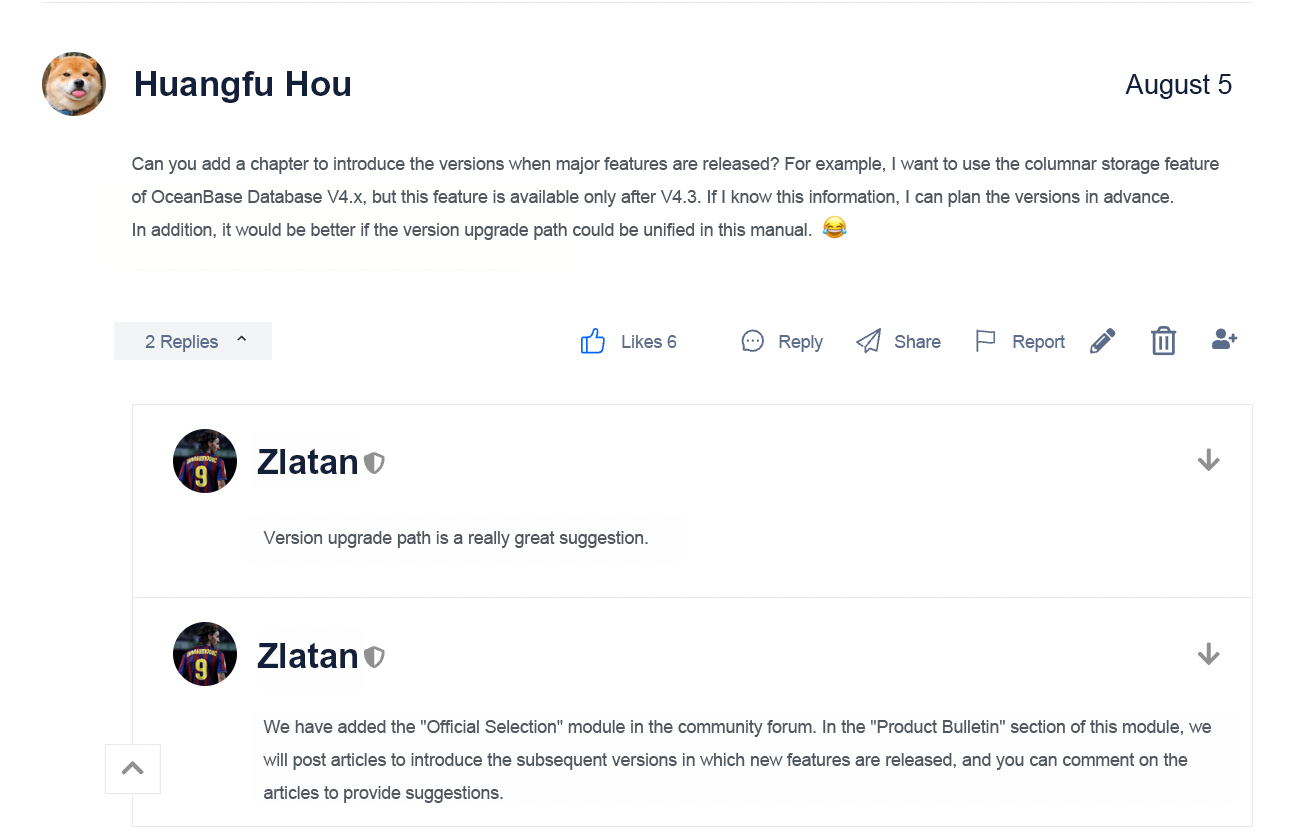
<style>
.page{position:relative;width:1292px;height:840px;background:#ffffff}
.page>*{position:absolute;margin:0}
.t1{font:35px "Arial-BoldMT";color:#132039}
.t2{font:27.1px "ArialMT";color:#132039}
.t3{font:17.5px/33px "ArialMT";color:#50575e}
.t4{font:17.5px "ArialMT";color:#5c6c8a}
.t5{font:17.5px "ArialMT";color:#50575e}
</style>
<div class="page">
<p class="t1" style="left:136px;top:71px;width:214px;height:32px">Huangfu Hou</p>
<p class="t2" style="left:1125px;top:74px;width:107px;height:25px">August 5</p>
<p class="t3" style="left:132px;top:157px;width:1087px;height:83px">Can you add a chapter to introduce the versions when major features are released? For example, I want to use the columnar storage feature of OceanBase Database V4.x, but this feature is available only after V4.3. If I know this information, I can plan the versions in advance.<br>In addition, it would be better if the version upgrade path could be unified in this manual.</p>
<p class="t4" style="left:145px;top:335px;width:73px;height:17px">2 Replies</p>
<p class="t4" style="left:622px;top:335px;width:55px;height:13px">Likes 6</p>
<p class="t4" style="left:779px;top:335px;width:44px;height:17px">Reply</p>
<p class="t4" style="left:895px;top:335px;width:46px;height:13px">Share</p>
<p class="t4" style="left:1013px;top:335px;width:52px;height:17px">Report</p>
<p class="t1" style="left:257px;top:448px;width:100px;height:26px">Zlatan</p>
<p class="t5" style="left:263px;top:531px;width:385px;height:17px">Version upgrade path is a really great suggestion.</p>
<p class="t1" style="left:257px;top:642px;width:100px;height:26px">Zlatan</p>
<p class="t3" style="left:263px;top:720px;width:949px;height:83px">We have added the "Official Selection" module in the community forum. In the "Product Bulletin" section of this module, we will post articles to introduce the subsequent versions in which new features are released, and you can comment on the articles to provide suggestions.</p>
</div>
